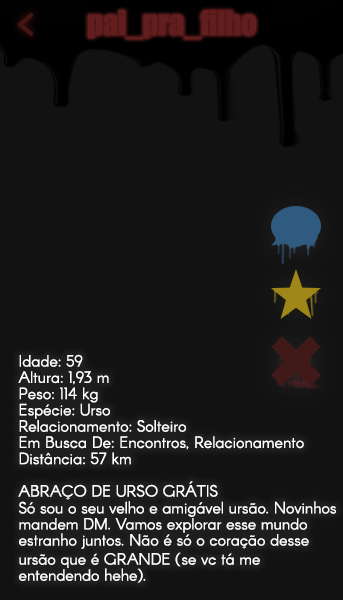
<style>
.page{position:relative;width:343px;height:600px;background:#121212}
.page>*{position:absolute;margin:0}
.t1{font:31px "Impact";letter-spacing:-0.015em;color:#621e1e}
.t2{font:16px "Arcon-Regular";color:#ffffff}
.t3{font:16px/19px "Arcon-Regular";letter-spacing:-0.003em;color:#ffffff}
.t4{font:16px/19.8px "Arcon-Regular";letter-spacing:-0.003em;color:#ffffff}
.t5{font:16px/22px "Arcon-Regular";letter-spacing:-0.003em;color:#ffffff}
</style>
<div class="page">
<p class="t1" style="left:88px;top:10px;width:168px;height:29px">pai_pra_filho</p>
<p class="t2" style="left:18px;top:354px;width:286px;height:111px">Idade: 59<br>Altura: 1,93 m<br>Peso: 114 kg<br>Espécie: Urso<br>Relacionamento: Solteiro<br>Em Busca De: Encontros, Relacionamento<br>Distância: 57 km</p>
<p class="t3" style="left:18px;top:481px;width:318px;height:102px"><span class="t4">ABRAÇO DE URSO GRÁTIS<br>Só sou o seu velho e amigável ursão. Novinhos<br></span>mandem DM. Vamos explorar esse mundo<br>estranho juntos. Não é só o coração desse<br><span class="t5">ursão que é GRANDE (se vc tá me<br></span>entendendo hehe).</p>
</div>
